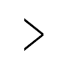
<style>
.page{position:relative;width:66px;height:66px;background:#ffffff}
.page>*{position:absolute;margin:0}
.t1{font:65.1px "BradleyHandITC";color:#000000;scale:0.52 1}
</style>
<div class="page">
<p class="t1" style="left:24px;top:18px;width:20px;height:33px">&gt;</p>
</div>
